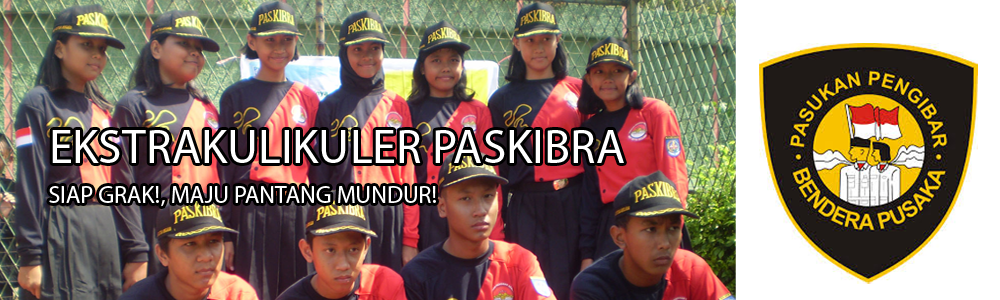
<style>
.page{position:relative;width:1000px;height:300px}
.page>*{position:absolute;margin:0}
.t1{font:48px "MyriadPro-Regular";color:#ffffff}
.t2{font:24px "MyriadPro-Regular";color:#ffffff}
</style>
<div class="page">
<p class="t1" style="left:52px;top:130px;width:572px;height:33px">EKSTRAKULIKULER PASKIBRA</p>
<p class="t2" style="left:49px;top:186px;width:387px;height:21px">SIAP GRAK!, MAJU PANTANG MUNDUR!</p>
</div>
